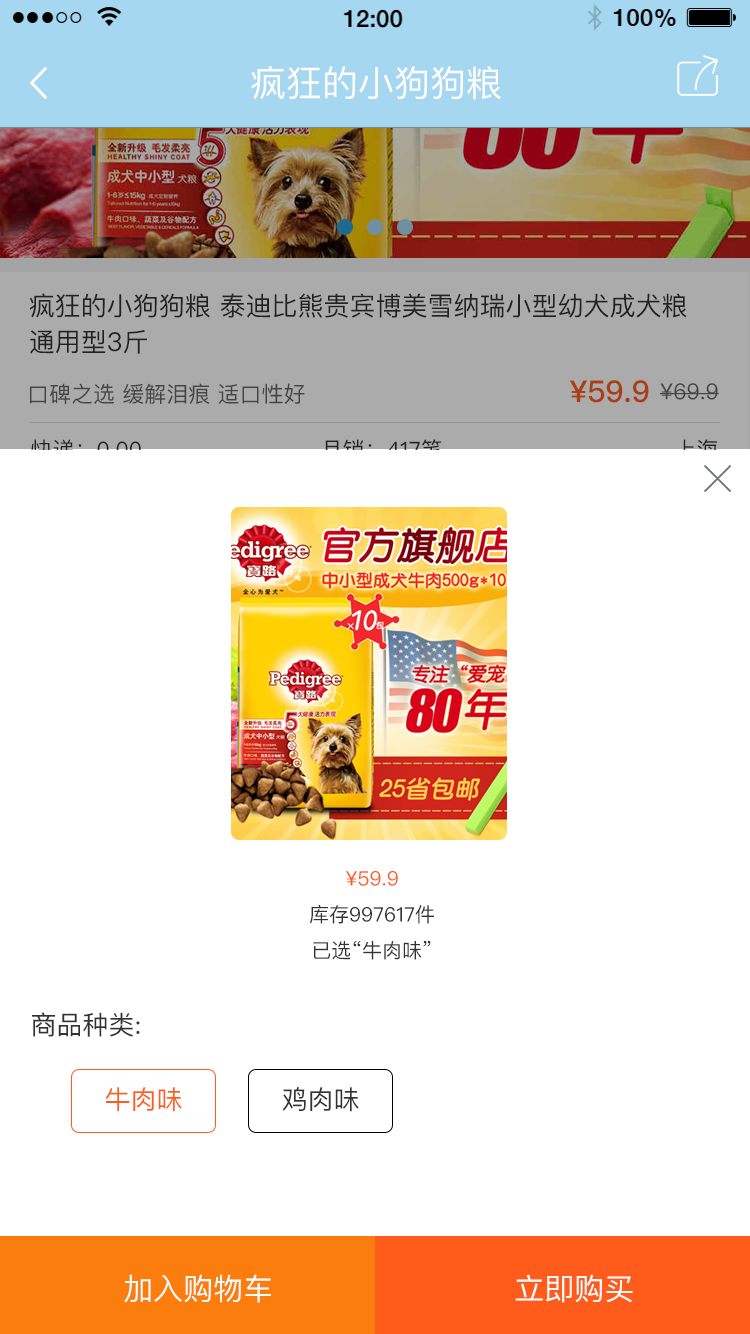
<style>
.page{position:relative;width:750px;height:1334px;background:#ffffff}
.page>*{position:absolute;margin:0}
.t1{font:36px "PingFangSC-Regular";color:#fffdfd}
.t2{font:26px/36px "PingFangSC-Regular";color:#333333}
.t3{font:22px "PingFangSC-Regular";color:#444444}
.t4{font:30px "PingFangSC-Medium";color:#ab3e13}
.t5{font:22px "PingFangSC-Regular"}
.t6{font:20px/36px "PingFangSC-Regular";color:#333333}
.t7{font:20px/36px "PingFangSC-Regular";color:#ff5c1c}
.t8{font:26px "PingFangSC-Regular";color:#333333}
.t9{font:26px "PingFangSC-Regular";color:#ff5c1c}
.t10{font:30px "PingFangSC-Regular";color:#fefcfc}
</style>
<div class="page">
<p class="t1" style="left:251px;top:66px;width:250px;height:34px">疯狂的小狗狗粮</p>
<p class="t2" style="left:29px;top:293px;width:658px;height:61px">疯狂的小狗狗粮 泰迪比熊贵宾博美雪纳瑞小型幼犬成犬粮<br>通用型3斤</p>
<p class="t3" style="left:30px;top:383px;width:275px;height:22px">口碑之选 缓解泪痕 适口性好</p>
<p class="t4" style="left:569px;top:380px;width:80px;height:23px">¥59.9</p>
<p class="t3" style="left:660px;top:383px;width:59px;height:17px">¥69.9</p>
<p class="t5" style="left:31px;top:439px;width:110px;height:21px">快递：0.00</p>
<p class="t5" style="left:323px;top:439px;width:119px;height:21px">月销：417笔</p>
<p class="t6" style="left:310px;top:871px;width:124px;height:89px;text-align:center"><span class="t7">¥59.9<br></span>库存997617件<br>已选“牛肉味”</p>
<p class="t8" style="left:32px;top:1012px;width:108px;height:25px">商品种类:</p>
<p class="t9" style="left:105px;top:1087px;width:77px;height:25px">牛肉味</p>
<p class="t8" style="left:282px;top:1087px;width:77px;height:25px">鸡肉味</p>
<p class="t10" style="left:124px;top:1274px;width:147px;height:29px">加入购物车</p>
<p class="t10" style="left:515px;top:1274px;width:118px;height:29px">立即购买</p>
</div>
